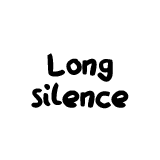
<style>
.page{position:relative;width:160px;height:160px;background:#ffffff}
.page>*{position:absolute;margin:0}
.t1{font:35.9px/31.9px "QAReports";color:#000000}
</style>
<div class="page">
<p class="t1" style="left:31px;top:53px;width:98px;height:56px;text-align:center">Long<br>silence</p>
</div>
